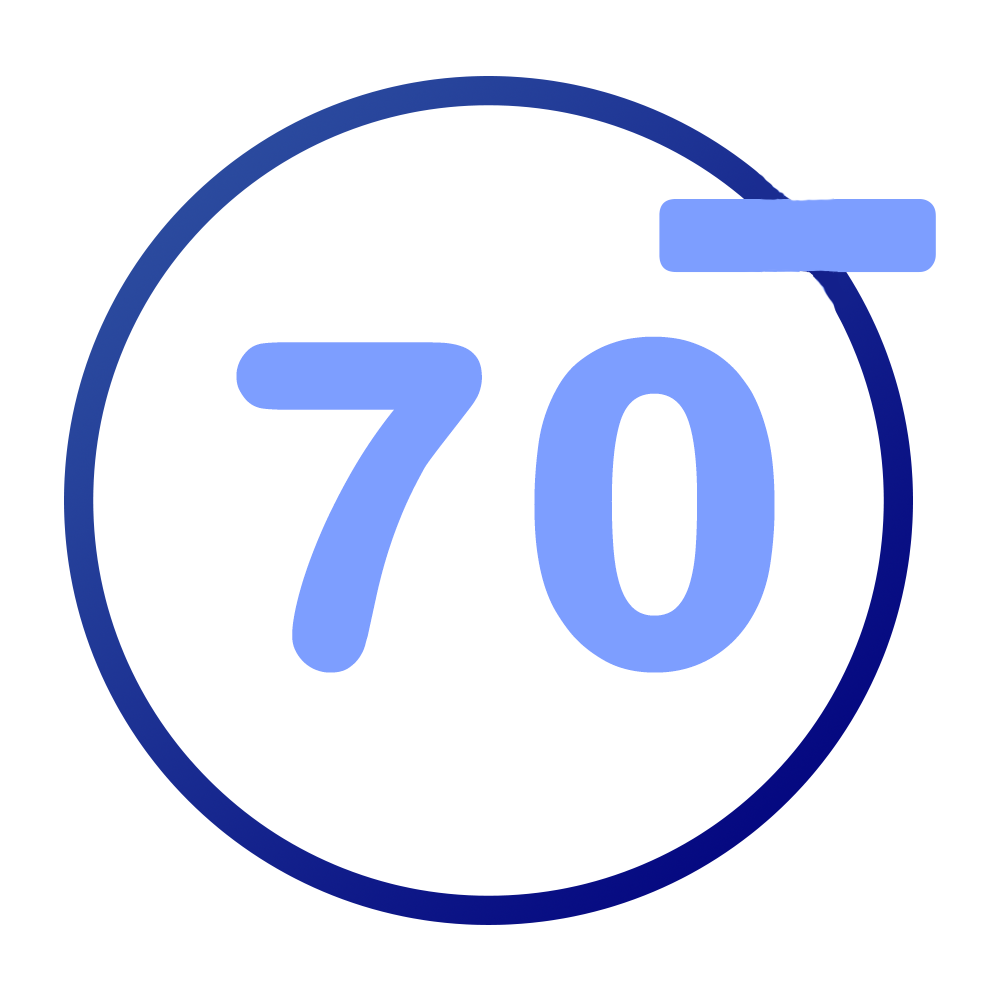
<style>
.page{position:relative;width:1000px;height:1000px;background:#ffffff}
.page>*{position:absolute;margin:0}
.t1{font:456.8px "ArialRoundedMT-ExtraBold";letter-spacing:0.025em;color:#7d9eff}
</style>
<div class="page">
<p class="t1" style="left:236px;top:336px;width:539px;height:337px">70</p>
</div>
